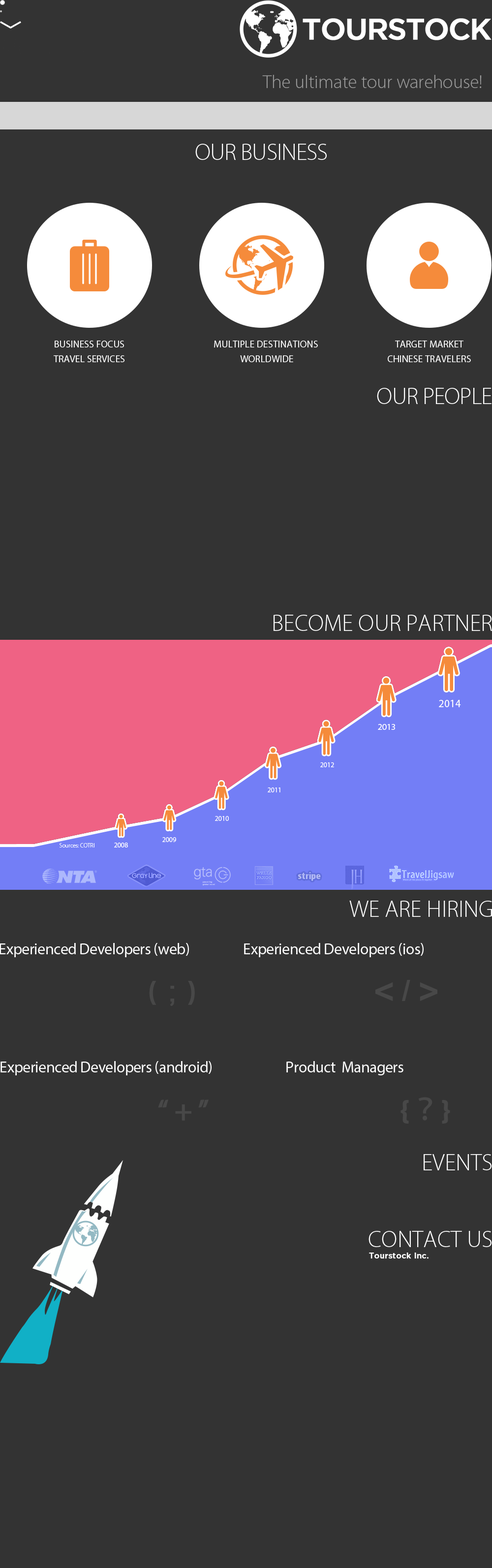
<style>
.page{position:relative;width:492px;height:1568px;background:#333333}
.page>*{position:absolute;margin:0}
.t1{font:29.5px "Gotham-Medium";letter-spacing:-0.05em;color:#ffffff;font-weight:bold}
.t2{font:18.7px "MyriadPro-Light";color:#9a9a9a}
.t3{font:23.6px "MyriadPro-Light";letter-spacing:-0.02em;color:#ffffff;text-transform:uppercase}
.t4{font:9.8px/14.8px "MyriadPro-Regular";color:#ffffff;text-transform:uppercase}
.t5{font:23.6px "MyriadPro-Light";color:#ffffff;text-transform:uppercase}
.t6{font:15.7px "MyriadPro-Regular";letter-spacing:-0.02em;color:#ffffff}
.t7{font:29.5px "MyriadPro-SemiboldCond";letter-spacing:0.1em;color:#484848;font-weight:bold}
.t8{font:29.5px "ArialMT";letter-spacing:0.1em;color:#484848;font-weight:bold}
.t9{font:29.5px "MyriadPro-SemiboldCond";letter-spacing:0.01em;color:#484848;font-weight:bold}
.t10{font:35.4px "MyriadPro-BlackSemiExt";letter-spacing:-0.005em;color:#484848}
.t11{font:29.5px "Arial-BoldMT";letter-spacing:-0.005em;color:#484848}
.t12{font:35.4px "MyriadPro-BlackSemiExt";letter-spacing:-0.05em;color:#484848}
.t13{font:29.5px "MyriadPro-BlackSemiExt";letter-spacing:0.25em;color:#484848}
.t14{font:29.5px "MyriadPro-BlackSemiExt";letter-spacing:0.1em;color:#484848}
.t15{font:29.5px "AdobeHeitiStd-Regular";letter-spacing:-0.2em;color:#484848}
.t16{font:29.5px "MyriadPro-BlackSemiExt";letter-spacing:-0.2em;color:#484848}
.t17{font:29.5px "MyriadPro-SemiboldCond";letter-spacing:0.2em;color:#484848;font-weight:bold}
.t18{font:7.9px "Gotham-Medium";letter-spacing:0.01em;color:#ffffff;font-weight:bold}
</style>
<div class="page">
<p class="t1" style="left:303px;top:18px;width:189px;height:22px">TOURSTOCK</p>
<p class="t2" style="left:262px;top:75px;width:220px;height:13px">The ultimate tour warehouse!</p>
<p class="t3" style="left:195px;top:144px;width:132px;height:16px">Our business</p>
<p class="t4" style="left:54px;top:341px;width:71px;height:21px;text-align:center">Business Focus<br>Travel Services</p>
<p class="t4" style="left:214px;top:341px;width:104px;height:21px;text-align:center">Multiple Destinations <br>Worldwide</p>
<p class="t4" style="left:388px;top:341px;width:83px;height:21px;text-align:center">Target Market<br>Chinese Travelers</p>
<p class="t3" style="left:377px;top:388px;width:115px;height:16px">Our People</p>
<p class="t5" style="left:274px;top:615px;width:218px;height:16px">Become Our Partner</p>
<p class="t5" style="left:349px;top:901px;width:143px;height:16px">We are HIRING</p>
<p class="t6" style="left:0px;top:943px;width:189px;height:14px">Experienced Developers (web)</p>
<p class="t6" style="left:244px;top:943px;width:180px;height:14px">Experienced Developers (ios)</p>
<p class="t7" style="left:149px;top:981px;width:46px;height:25px">( <span class="t8">; </span><span class="t9">)</span></p>
<p class="t10" style="left:376px;top:980px;width:62px;height:21px">&lt; <span class="t11">/ </span><span class="t12">&gt;</span></p>
<p class="t6" style="left:0px;top:1061px;width:212px;height:14px">Experienced Developers (android)</p>
<p class="t6" style="left:286px;top:1061px;width:118px;height:14px">Product  Managers</p>
<p class="t13" style="left:401px;top:1097px;width:49px;height:27px"><span class="t14"> </span>{<span class="t15">？</span><span class="t16">}</span></p>
<p class="t17" style="left:158px;top:1099px;width:51px;height:22px">“+”</p>
<p class="t5" style="left:424px;top:1154px;width:68px;height:16px">Events</p>
<p class="t5" style="left:369px;top:1231px;width:123px;height:16px">Contact Us</p>
<p class="t18" style="left:369px;top:1253px;width:60px;height:6px">Tourstock Inc.</p>
</div>
